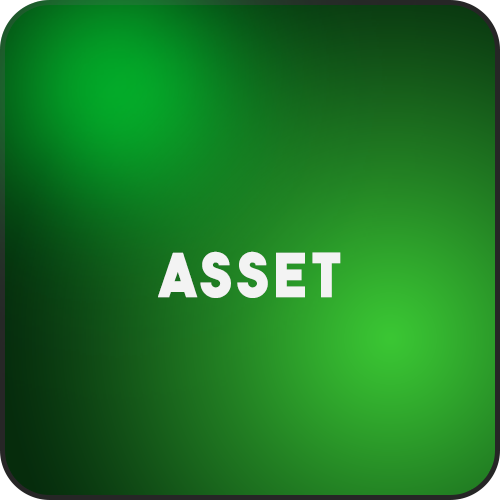
<style>
.page{position:relative;width:500px;height:500px}
.page>*{position:absolute;margin:0}
.t1{font:60px "THE-BOLD-FONT,-PRO";letter-spacing:0.05em;color:#f3f3f3;font-weight:bold}
</style>
<div class="page">
<p class="t1" style="left:158px;top:251px;width:183px;height:47px">ASSET</p>
</div>
